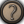
<style>
.page{position:relative;width:24px;height:24px}
.page>*{position:absolute;margin:0}
.t1{font:21.5px "BookAntiqua"}
</style>
<div class="page">
<p class="t1" style="left:9px;top:5px;width:8px;height:15px">?</p>
</div>
